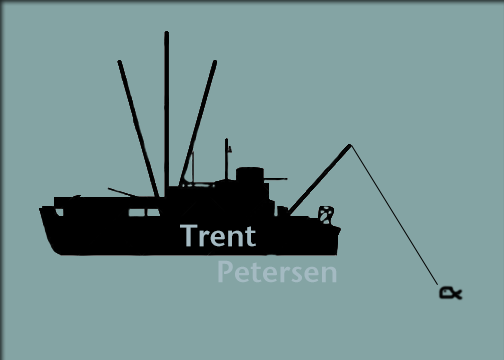
<style>
.page{position:relative;width:504px;height:360px;background:#84a4a4}
.page>*{position:absolute;margin:0}
.t1{font:30px "StoneSansSemOSITCTTSemi";color:#a4bac2}
</style>
<div class="page">
<p class="t1" style="left:180px;top:224px;width:157px;height:59px">Trent<br> Petersen</p>
</div>
